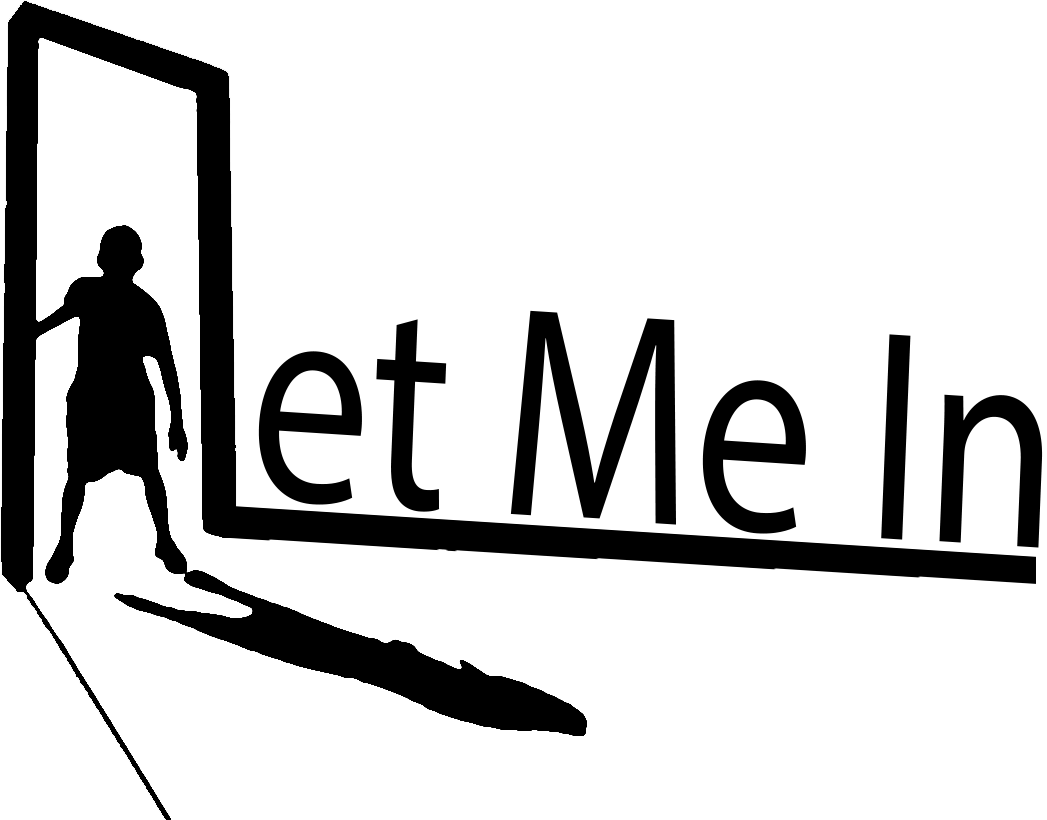
<style>
.page{position:relative;width:1047px;height:820px;background:#ffffff}
.page>*{position:absolute;margin:0}
.t1{font:302.5px "MyriadPro-Regular";color:#000000;scale:0.79 1}
</style>
<div class="page">
<p class="t1" style="left:258px;top:310px;width:785px;height:238px;rotate:4deg">et Me In</p>
</div>
